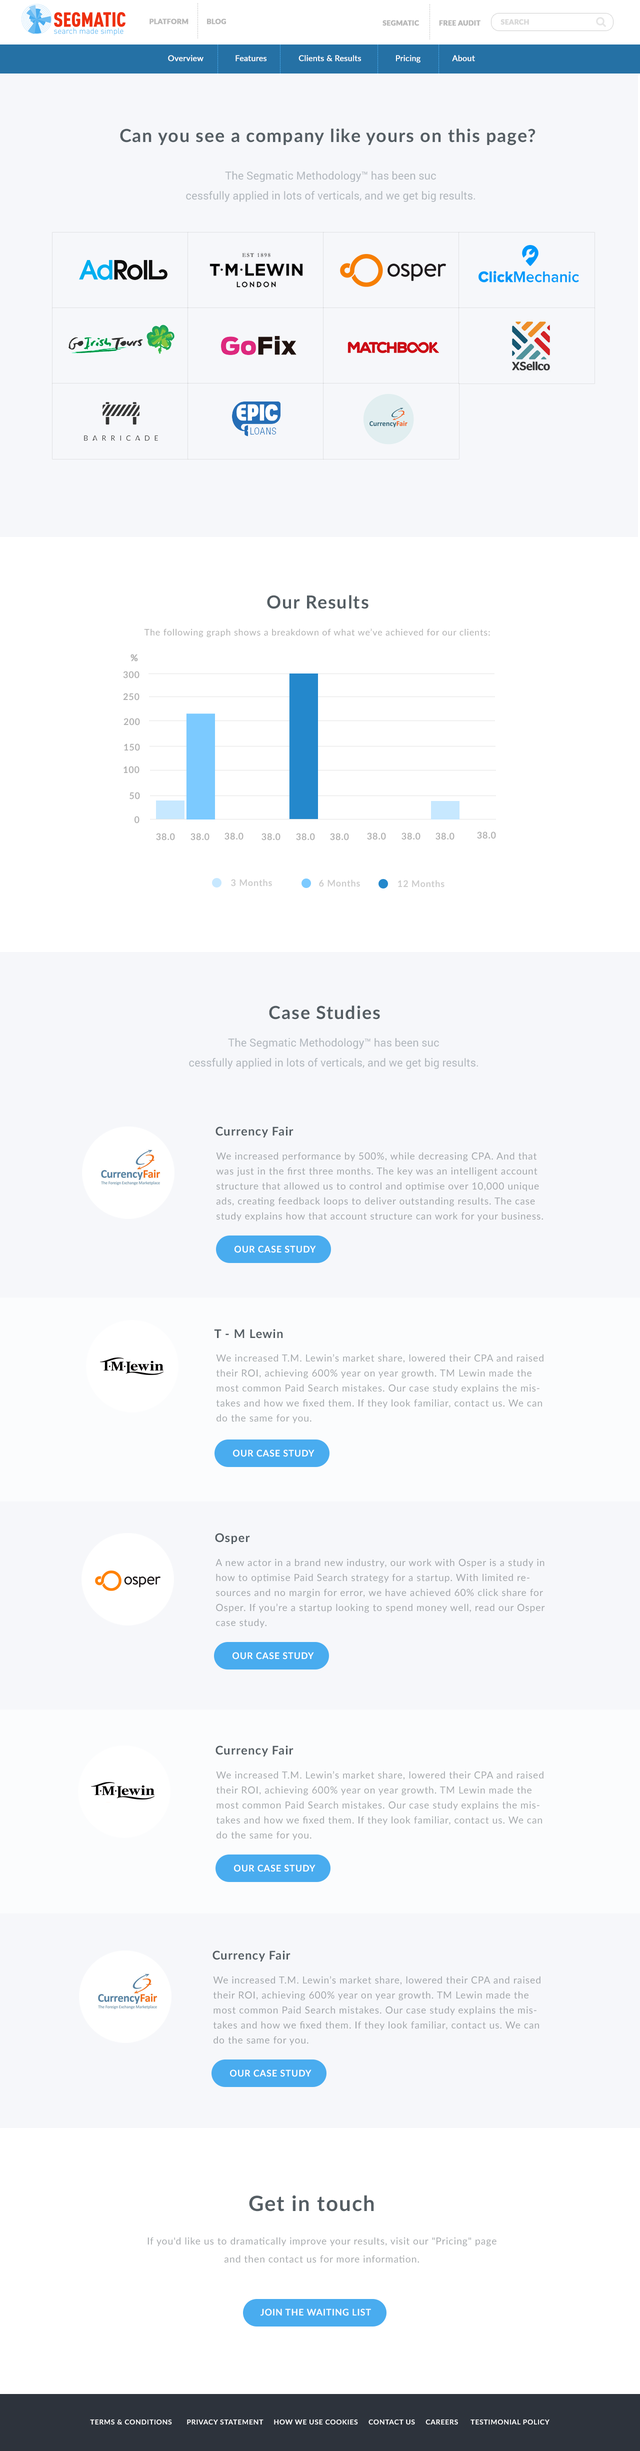
<style>
.page{position:relative;width:640px;height:2451px;background:#f6f7fa}
.page>*{position:absolute;margin:0}
.t1{font:7px "Lato-Black";color:#b8b8b8;text-transform:uppercase;font-weight:bold}
.t2{font:7px "Lato-Black";color:#d8d8d8;text-transform:uppercase;font-weight:bold}
.t3{font:8px "Lato-Regular";color:#ffffff;font-weight:bold}
.t4{font:18px "Lato-Bold";letter-spacing:0.05em;color:#545d63}
.t5{font:11px/20px "Roboto-Regular";color:#b2b8be}
.t6{font:9px "Lato-Regular";letter-spacing:0.05em;color:#b1b1b1}
.t7{font:9px "Lato-Bold";letter-spacing:0.05em;color:#b1b1b1;font-weight:bold}
.t8{font:9px "Lato-Bold";letter-spacing:0.05em;color:#b1b1b1}
.t9{font:9px "Lato-Bold";letter-spacing:0.05em;color:#cbcbcb}
.t10{font:12px "Lato-Bold";letter-spacing:0.05em;color:#545d63}
.t11{font:9.7px/15px "Lato-Regular";letter-spacing:0.05em;color:#a1a5a9}
.t12{font:9px "Lato-Bold";letter-spacing:0.05em;color:#ffffff;text-transform:uppercase}
.t13{font:9.7px/15px "Lato-Regular";letter-spacing:0.05em;color:#a4a8ab}
.t14{font:21px "Lato-Bold";letter-spacing:0.05em;color:#545d63}
.t15{font:9.7px/18px "Lato-Regular";letter-spacing:0.05em;color:#a6a9ac}
.t16{font:7px "Lato-Bold";letter-spacing:0.05em;color:#ffffff;text-transform:uppercase}
</style>
<div class="page">
<p class="t1" style="left:150px;top:19px;width:76px;height:6px">Platform          Blog</p>
<p class="t1" style="left:383px;top:20px;width:98px;height:6px">Segmatic           free Audit</p>
<p class="t2" style="left:501px;top:19px;width:28px;height:6px">search</p>
<p class="t3" style="left:168px;top:55px;width:307px;height:8px">Overview              Features              Clients &amp; Results               Pricing              About</p>
<p class="t4" style="left:120px;top:129px;width:416px;height:17px">Can you see a company like yours on this page?</p>
<p class="t5" style="left:186px;top:171px;width:289px;height:31px;text-align:center">The Segmatic Methodology™ has been suc<br>cessfully applied in lots of verticals, and we get big results.</p>
<p class="t4" style="left:267px;top:595px;width:102px;height:14px">Our Results</p>
<p class="t6" style="left:144px;top:629px;width:346px;height:9px">The following graph shows a breakdown of what we’ve achieved for our clients:</p>
<p class="t7" style="left:131px;top:654px;width:7px;height:8px">%</p>
<p class="t8" style="left:123px;top:671px;width:17px;height:8px">300</p>
<p class="t8" style="left:123px;top:693px;width:17px;height:8px">250</p>
<p class="t8" style="left:124px;top:718px;width:16px;height:8px">200</p>
<p class="t8" style="left:124px;top:744px;width:16px;height:7px">150</p>
<p class="t8" style="left:124px;top:766px;width:16px;height:8px">100</p>
<p class="t8" style="left:130px;top:792px;width:10px;height:8px">50</p>
<p class="t8" style="left:135px;top:816px;width:5px;height:8px">0</p>
<p class="t8" style="left:156px;top:833px;width:19px;height:8px">38.0</p>
<p class="t8" style="left:191px;top:833px;width:19px;height:8px">38.0</p>
<p class="t8" style="left:225px;top:833px;width:19px;height:7px">38.0</p>
<p class="t8" style="left:262px;top:833px;width:19px;height:8px">38.0</p>
<p class="t8" style="left:296px;top:833px;width:19px;height:8px">38.0</p>
<p class="t8" style="left:330px;top:833px;width:19px;height:8px">38.0</p>
<p class="t8" style="left:367px;top:833px;width:19px;height:7px">38.0</p>
<p class="t8" style="left:402px;top:833px;width:19px;height:7px">38.0</p>
<p class="t8" style="left:436px;top:833px;width:19px;height:7px">38.0</p>
<p class="t8" style="left:477px;top:832px;width:19px;height:7px">38.0</p>
<p class="t9" style="left:231px;top:879px;width:41px;height:8px">3 Months</p>
<p class="t9" style="left:319px;top:880px;width:41px;height:7px">6 Months</p>
<p class="t9" style="left:398px;top:880px;width:47px;height:8px">12 Months</p>
<p class="t4" style="left:269px;top:1006px;width:111px;height:14px">Case Studies</p>
<p class="t5" style="left:189px;top:1038px;width:289px;height:31px;text-align:center">The Segmatic Methodology™ has been suc<br>cessfully applied in lots of verticals, and we get big results.</p>
<p class="t10" style="left:216px;top:1127px;width:78px;height:11px">Currency Fair</p>
<p class="t11" style="left:216px;top:1152px;width:327px;height:70px">We increased performance by 500%, while decreasing CPA. And that was just in the first three months. The key was an intelligent account structure that allowed us to control and optimise over 10,000 unique ads, creating feedback loops to deliver outstanding results. The case study explains how that account structure can work for your business.</p>
<p class="t12" style="left:235px;top:1246px;width:81px;height:7px">Our case study</p>
<p class="t10" style="left:214px;top:1329px;width:69px;height:10px">T - M Lewin</p>
<p class="t13" style="left:216px;top:1354px;width:328px;height:70px">We increased T.M. Lewin’s market share, lowered their CPA and raised their ROI, achieving 600% year on year growth. TM Lewin made the most common Paid Search mistakes. Our case study explains the mistakes and how we fixed them. If they look familiar, contact us. We can do the same for you.</p>
<p class="t12" style="left:233px;top:1450px;width:82px;height:7px">Our case study</p>
<p class="t10" style="left:215px;top:1533px;width:35px;height:11px">Osper</p>
<p class="t11" style="left:216px;top:1559px;width:329px;height:69px">A new actor in a brand new industry, our work with Osper is a study in how to optimise Paid Search strategy for a startup. With limited resources and no margin for error, we have achieved 60% click share for Osper. If you’re a startup looking to spend money well, read our Osper case study.</p>
<p class="t12" style="left:233px;top:1652px;width:81px;height:8px">Our case study</p>
<p class="t10" style="left:216px;top:1746px;width:78px;height:11px">Currency Fair</p>
<p class="t13" style="left:216px;top:1771px;width:328px;height:70px">We increased T.M. Lewin’s market share, lowered their CPA and raised their ROI, achieving 600% year on year growth. TM Lewin made the most common Paid Search mistakes. Our case study explains the mistakes and how we fixed them. If they look familiar, contact us. We can do the same for you.</p>
<p class="t12" style="left:234px;top:1865px;width:82px;height:7px">Our case study</p>
<p class="t10" style="left:213px;top:1951px;width:78px;height:11px">Currency Fair</p>
<p class="t11" style="left:213px;top:1976px;width:328px;height:70px">We increased T.M. Lewin’s market share, lowered their CPA and raised their ROI, achieving 600% year on year growth. TM Lewin made the most common Paid Search mistakes. Our case study explains the mistakes and how we fixed them. If they look familiar, contact us. We can do the same for you.</p>
<p class="t12" style="left:230px;top:2070px;width:82px;height:7px">Our case study</p>
<p class="t14" style="left:249px;top:2195px;width:125px;height:17px">Get in touch</p>
<p class="t15" style="left:148px;top:2237px;width:349px;height:26px;text-align:center">If you'd like us to dramatically improve your results, visit our "Pricing" page and then contact us for more information.</p>
<p class="t12" style="left:261px;top:2309px;width:110px;height:7px">Join the Waiting List</p>
<p class="t16" style="left:90px;top:2420px;width:460px;height:5px">Terms &amp; Conditions       Privacy Statement     How we use cookies     Contact Us     Careers      Testimonial Policy</p>
</div>
